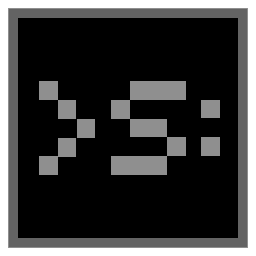
<style>
.page{position:relative;width:256px;height:256px;background:#000000}
.page>*{position:absolute;margin:0}
.t1{font:150px "04b03";color:#8f8f8f;text-transform:uppercase}
</style>
<div class="page">
<p class="t1" style="left:39px;top:81px;width:181px;height:94px">&gt;s:</p>
</div>
